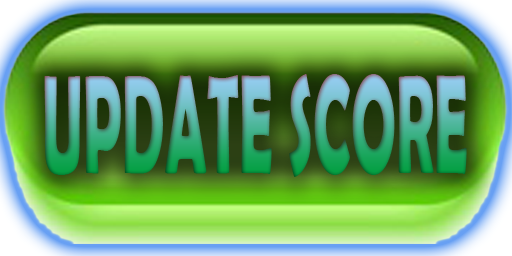
<style>
.page{position:relative;width:512px;height:256px}
.page>*{position:absolute;margin:0}
.t1{font:141.5px "BerlinSansFBDemi-Bold";scale:0.43 1}
</style>
<div class="page">
<p class="t1" style="left:44px;top:74px;width:423px;height:103px">UPDATE SCORE</p>
</div>
